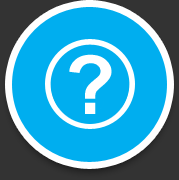
<style>
.page{position:relative;width:179px;height:180px;background:#00aeef}
.page>*{position:absolute;margin:0}
.t1{font:82px "Arial-BoldMT";color:#ffffff}
</style>
<div class="page">
<p class="t1" style="left:69px;top:54px;width:43px;height:60px">?</p>
</div>
